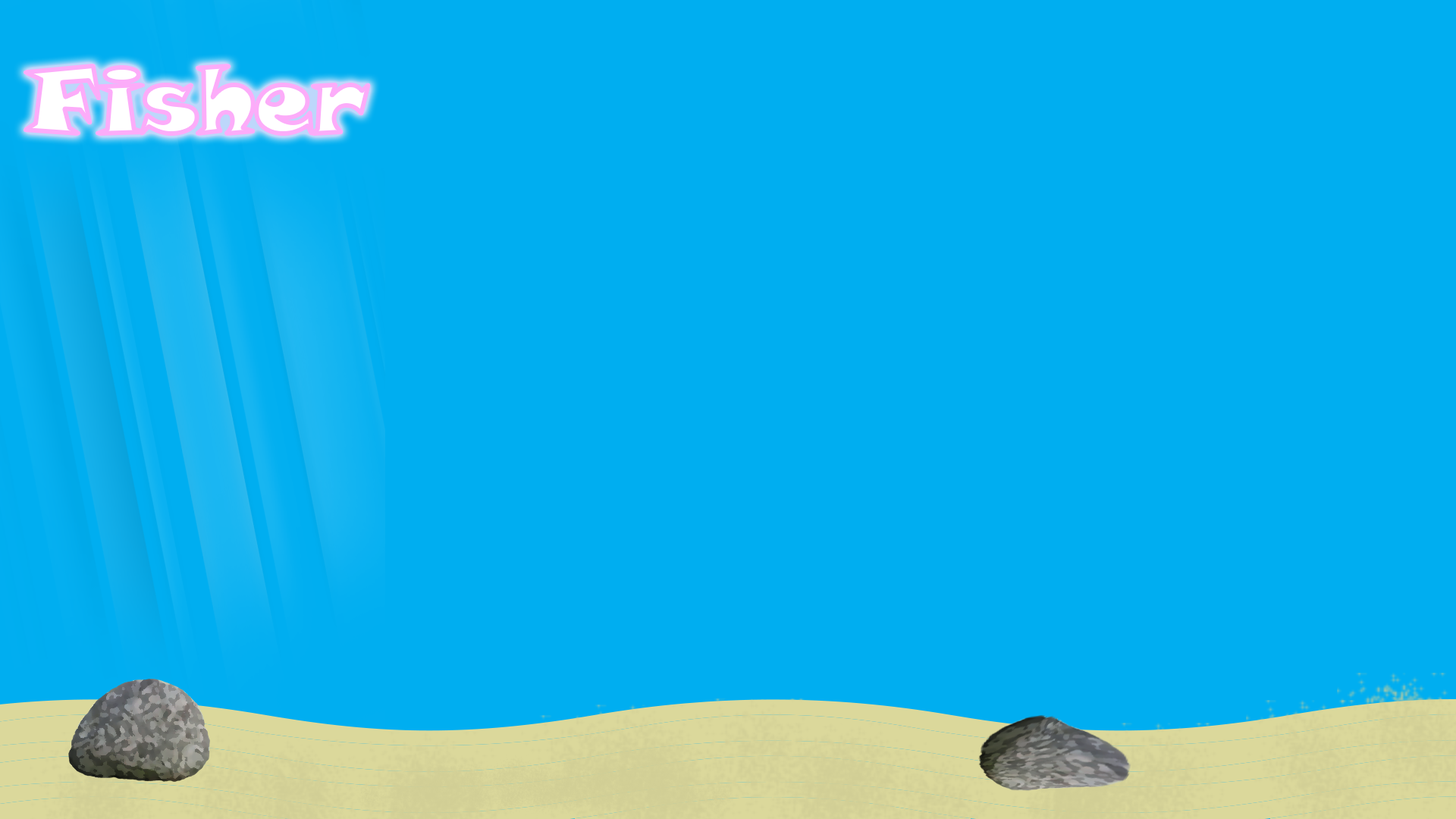
<style>
.page{position:relative;width:1456px;height:819px;background:#00aef0}
.page>*{position:absolute;margin:0}
.t1{font:113.7px "TolstyakHeavy";letter-spacing:0.005em;color:#ffffff}
</style>
<div class="page">
<p class="t1" style="left:25px;top:66px;width:344px;height:67px">Fisher</p>
</div>
